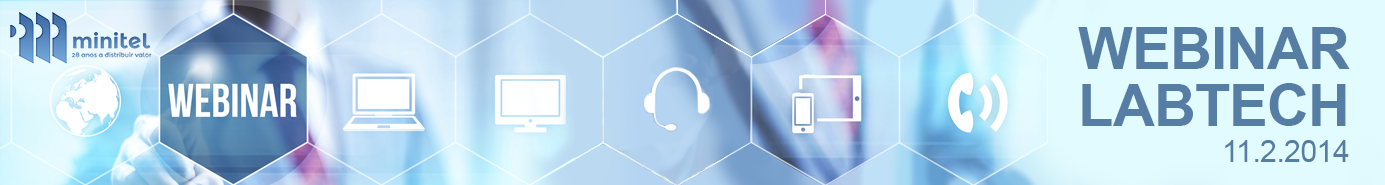
<style>
.page{position:relative;width:1385px;height:185px}
.page>*{position:absolute;margin:0}
.t1{font:58.3px "Arial-BoldMT";letter-spacing:-0.019em;color:#567ea5}
.t2{font:30.2px "ArialMT";letter-spacing:-0.019em;color:#567ea5}
</style>
<div class="page">
<p class="t1" style="left:1078px;top:27px;width:272px;height:42px">WEBINAR</p>
<p class="t1" style="left:1082px;top:83px;width:264px;height:43px">LABTECH</p>
<p class="t2" style="left:1225px;top:140px;width:124px;height:22px">11.2.2014</p>
</div>
